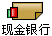
<style>
.page{position:relative;width:52px;height:36px;background:#ffffff}
.page>*{position:absolute;margin:0}
.t1{font:12px "SimSun";letter-spacing:0.02em;color:#000000}
</style>
<div class="page">
<p class="t1" style="left:2px;top:24px;width:48px;height:11px">现金银行</p>
</div>
